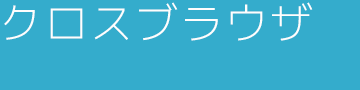
<style>
.page{position:relative;width:360px;height:90px;background:#34accc}
.page>*{position:absolute;margin:0}
.t1{font:43px "mplus-1c-light";letter-spacing:0.05em;color:#fefefe}
</style>
<div class="page">
<p class="t1" style="left:4px;top:2px;width:309px;height:39px">クロスブラウザ</p>
</div>
